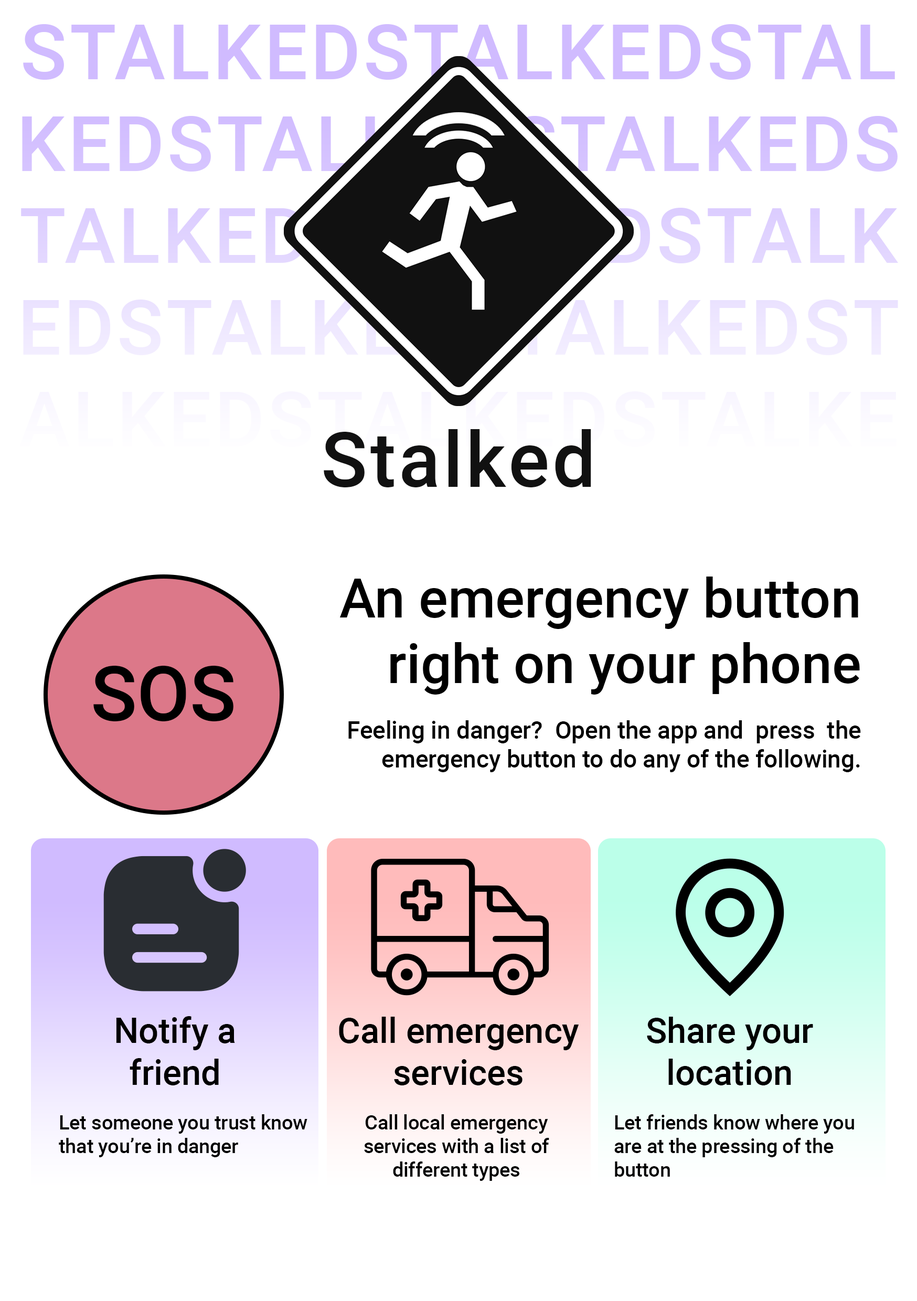
<style>
.page{position:relative;width:917px;height:1301px;background:#ffffff}
.page>*{position:absolute;margin:0}
.t1{font:76.5px "Roboto-Medium";letter-spacing:0.04em;color:#111111}
.t2{font:54.6px "Roboto-Medium";color:#000000}
.t3{font:76.5px "Roboto-Medium";color:#000000}
.t4{font:24px "Roboto-Medium";color:#000000}
.t5{font:35px "Roboto-Medium";color:#000000}
.t6{font:19.7px "Roboto-Medium";color:#000000}
</style>
<div class="page">
<p class="t1" style="left:324px;top:429px;width:267px;height:58px">Stalked</p>
<p class="t2" style="left:339px;top:576px;width:521px;height:118px;text-align:right">An emergency button right on your phone</p>
<p class="t3" style="left:93px;top:666px;width:140px;height:55px">SOS</p>
<p class="t4" style="left:348px;top:720px;width:513px;height:52px;text-align:right">Feeling in danger?  Open the app and  press  the emergency button to do any of the following.</p>
<p class="t5" style="left:116px;top:1016px;width:119px;height:69px;text-align:center">Notify a <br>friend</p>
<p class="t5" style="left:339px;top:1016px;width:240px;height:69px;text-align:center">Call emergency services</p>
<p class="t5" style="left:647px;top:1016px;width:166px;height:69px;text-align:center">Share your location</p>
<p class="t6" style="left:59px;top:1114px;width:248px;height:43px">Let someone you trust know that you’re in danger</p>
<p class="t6" style="left:364px;top:1114px;width:185px;height:67px;text-align:center">Call local emergency services with a list of different types</p>
<p class="t6" style="left:614px;top:1114px;width:240px;height:62px">Let friends know where you are at the pressing of the button</p>
</div>
